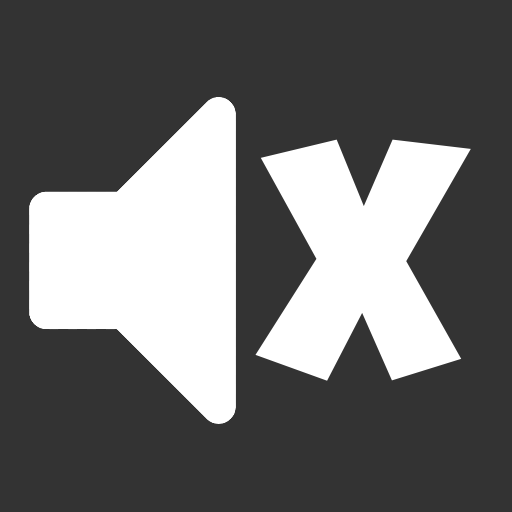
<style>
.page{position:relative;width:512px;height:512px;background:#333333}
.page>*{position:absolute;margin:0}
.t1{font:339.4px "LuckiestGuy-Regular";color:#ffffff}
</style>
<div class="page">
<p class="t1" style="left:255px;top:139px;width:216px;height:242px">X</p>
</div>
